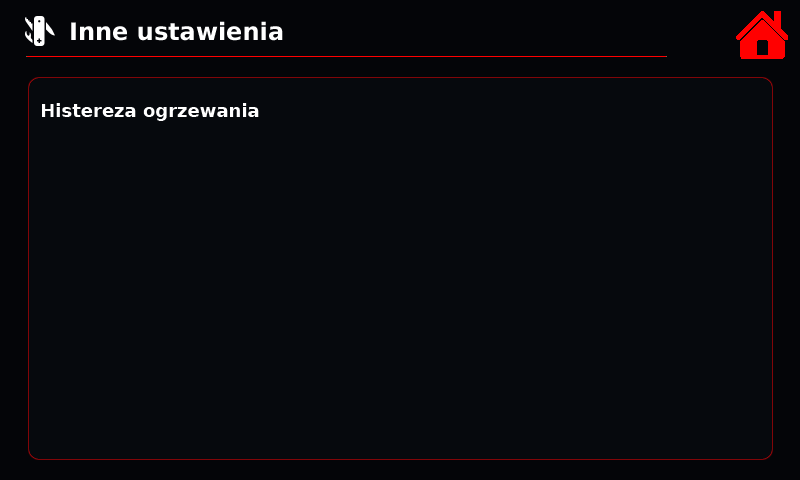
<style>
.page{position:relative;width:800px;height:480px;background:#06090d}
.page>*{position:absolute;margin:0}
.t1{font:24px "DejaVuSans-Bold";color:#ffffff}
.t2{font:18px "DejaVuSans-Bold";color:#ffffff}
</style>
<div class="page">
<p class="t1" style="left:71px;top:21px;width:212px;height:20px">Inne ustawienia</p>
<p class="t2" style="left:42px;top:103px;width:217px;height:18px">Histereza ogrzewania</p>
</div>
